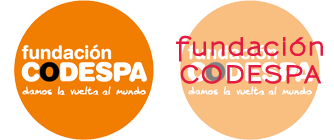
<style>
.page{position:relative;width:334px;height:140px;background:#ffffff}
.page>*{position:absolute;margin:0}
.t1{font:23px "Sansumi-Bold";letter-spacing:0.06em;color:#e41a41;font-weight:bold}
</style>
<div class="page">
<p class="t1" style="left:176px;top:35px;width:147px;height:49px;text-align:center">fundación<br>CODESPA</p>
</div>
